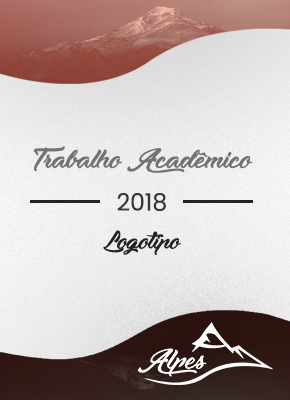
<style>
.page{position:relative;width:290px;height:400px}
.page>*{position:absolute;margin:0}
.t1{font:40px "Moonlights-on-the-Beach";color:#737373}
.t2{font:23.8px "Poppins-Regular";color:#373737}
.t3{font:35.3px "Moonlights-on-the-Beach";color:#232323}
</style>
<div class="page">
<p class="t1" style="left:33px;top:146px;width:220px;height:27px">Trabalho Acadêmico</p>
<p class="t2" style="left:117px;top:193px;width:49px;height:18px">2018</p>
<p class="t3" style="left:103px;top:230px;width:78px;height:25px">Logotipo</p>
</div>
